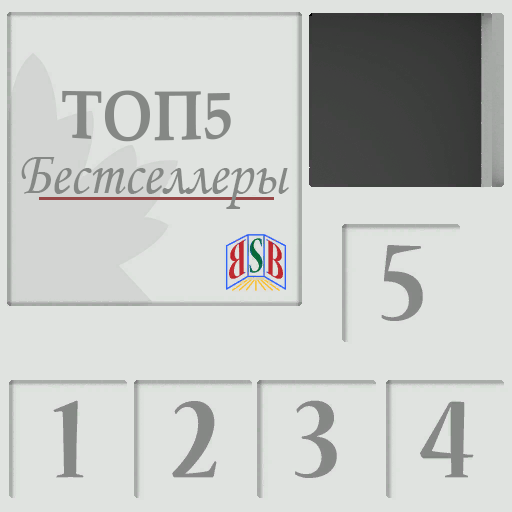
<style>
.page{position:relative;width:512px;height:512px;background:#e0e3e0}
.page>*{position:absolute;margin:0}
.t1{font:67.1px "PalatinoLinotype-Bold";color:#858885;scale:0.91 1}
.t2{font:61.6px "MonotypeCorsiva";color:#858885;scale:0.91 1}
</style>
<div class="page">
<p class="t1" style="left:62px;top:90px;width:169px;height:52px">ТОП5</p>
<p class="t2" style="left:21px;top:157px;width:268px;height:52px">Бестселлеры</p>
</div>
